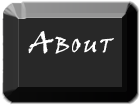
<style>
.page{position:relative;width:140px;height:105px;background:#282828}
.page>*{position:absolute;margin:0}
.t1{font:48px "VinerHandITC";letter-spacing:0.1em;color:#ffffff;font-variant:small-caps}
</style>
<div class="page">
<p class="t1" style="left:28px;top:31px;width:86px;height:23px">About</p>
</div>
